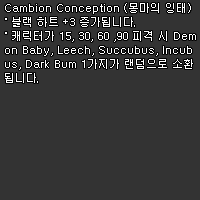
<style>
.page{position:relative;width:200px;height:200px;background:#333333}
.page>*{position:absolute;margin:0}
.t1{font:11px/14px "Dotum";color:#ffffff}
</style>
<div class="page">
<p class="t1" style="left:5px;top:3px;width:191px;height:80px">Cambion Conception (몽마의 잉태)<br>˚ 블랙 하트 +3 증가됩니다.<br>˚ 캐릭터가 15, 30, 60 ,90 피격 시 Dem<br>on Baby, Leech, Succubus, Incub<br>us, Dark Bum 1가지가 랜덤으로 소환<br>됩니다.</p>
</div>
